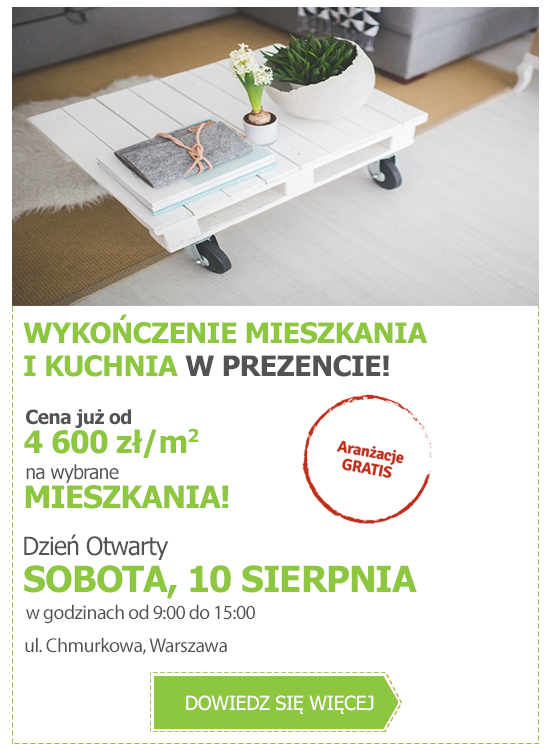
<style>
.page{position:relative;width:550px;height:750px;background:#ffffff}
.page>*{position:absolute;margin:0}
.t1{font:28.3px/33.3px "Tahoma-Bold";letter-spacing:-0.025em;color:#8dc63f;text-transform:uppercase}
.t2{font:28.3px/33.3px "Tahoma-Bold";letter-spacing:-0.025em;color:#545353;text-transform:uppercase}
.t3{font:19.4px "Tahoma-Bold";letter-spacing:-0.025em;color:#545353}
.t4{font:31px "Tahoma-Bold";letter-spacing:-0.025em;color:#8dc63f}
.t5{font:19.4px "Tahoma";letter-spacing:-0.025em;color:#545353}
.t6{font:31px "Tahoma-Bold";letter-spacing:-0.025em;color:#8dc63f;text-transform:uppercase}
.t7{font:25px "Tahoma";letter-spacing:-0.025em;color:#545353}
.t8{font:36px "Tahoma-Bold";letter-spacing:-0.025em;color:#8dc63f;text-transform:uppercase}
.t9{font:20px "MyriadPro-Regular";letter-spacing:-0.025em;color:#545353}
.t10{font:19.4px "Tahoma";letter-spacing:-0.025em;color:#ffffff;text-transform:uppercase}
</style>
<div class="page">
<p class="t1" style="left:23px;top:314px;width:405px;height:63px">WYKOŃCZENIE MIESZKANIA <br>I KUCHNIA <span class="t2">W PREZENCIE!</span></p>
<p class="t3" style="left:26px;top:409px;width:105px;height:19px">Cena już od</p>
<p class="t4" style="left:24px;top:428px;width:175px;height:30px">4 600 zł/m2</p>
<p class="t5" style="left:26px;top:464px;width:93px;height:19px">na wybrane</p>
<p class="t6" style="left:25px;top:485px;width:204px;height:24px">mieszkania!</p>
<p class="t7" style="left:24px;top:534px;width:145px;height:26px">Dzień Otwarty</p>
<p class="t8" style="left:24px;top:565px;width:393px;height:34px">sobota, 10 sierpnia</p>
<p class="t9" style="left:26px;top:604px;width:229px;height:20px">w godzinach od 9:00 do 15:00</p>
<p class="t9" style="left:25px;top:637px;width:202px;height:18px">ul. Chmurkowa, Warszawa</p>
<p class="t10" style="left:186px;top:695px;width:188px;height:19px">dowiedz się więcej</p>
</div>
